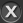
<style>
.page{position:relative;width:23px;height:23px;background:#333333}
.page>*{position:absolute;margin:0}
.t1{font:21px "LucidaGrande";color:#e5e4e4;font-weight:bold}
</style>
<div class="page">
<p class="t1" style="left:5px;top:5px;width:12px;height:13px">x</p>
</div>
